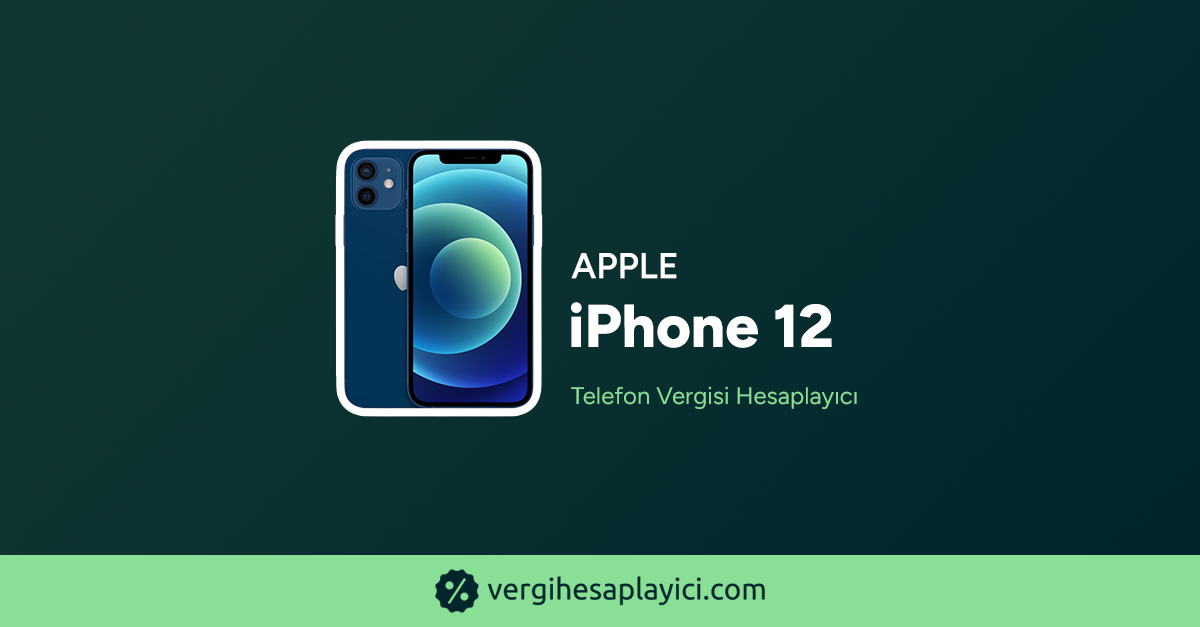
<style>
.page{position:relative;width:1200px;height:627px}
.page>*{position:absolute;margin:0}
.t1{font:36px "Figtree-SemiBold";color:#ffffff;text-transform:uppercase;font-weight:bold}
.t2{font:60.3px "Figtree-ExtraBold";color:#ffffff;font-weight:bold}
.t3{font:24px "Figtree-Regular";color:#88df95;font-weight:bold}
</style>
<div class="page">
<p class="t1" style="left:571px;top:253px;width:106px;height:26px">Apple</p>
<p class="t2" style="left:571px;top:302px;width:261px;height:46px">iPhone 12</p>
<p class="t3" style="left:571px;top:386px;width:286px;height:23px">Telefon Vergisi Hesaplayıcı</p>
</div>
